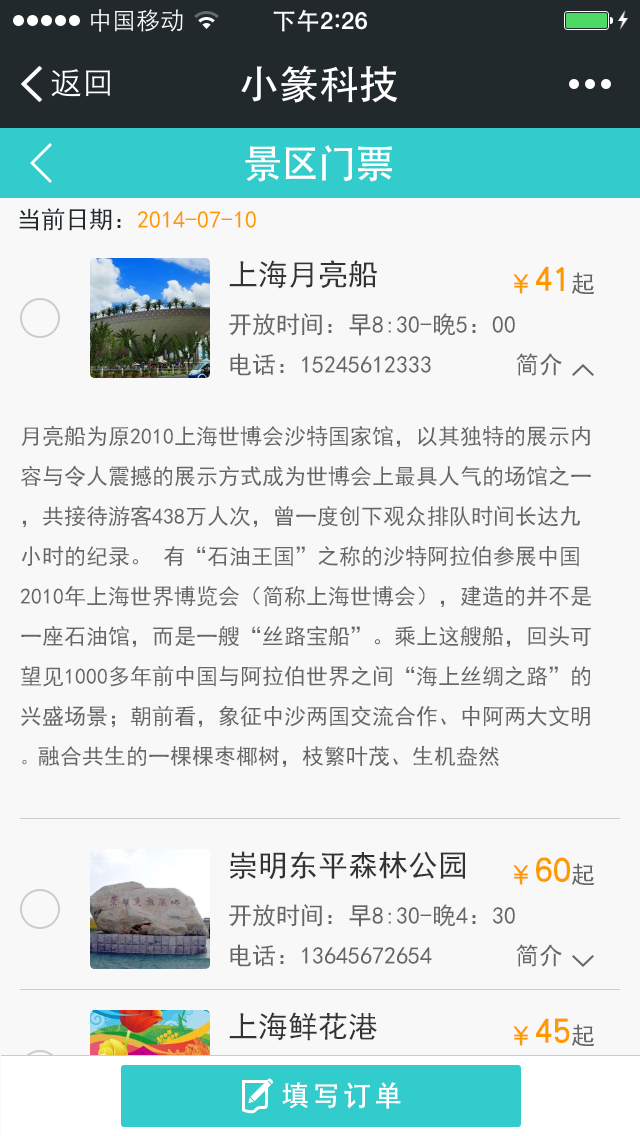
<style>
.page{position:relative;width:640px;height:1136px;background:#f8f8f8}
.page>*{position:absolute;margin:0}
.t1{font:40px "AdobeHeitiStd-Regular";color:#ffffff}
.t2{font:24px "SimHei";color:#ff9900}
.t3{font:24px "SimHei";color:#22292c}
.t4{font:24px/48px "SimHei";color:#666666}
.t5{font:30px/48px "SimHei";color:#333333}
.t6{font:24px/40px "SimHei";color:#666666}
.t7{font:36px "ç»å¸é»ä½ç®-regular";color:#ff9900}
.t8{font:28px "ç»å¸é»ä½ç®-regular";color:#ff9900}
.t9{font:24px "SimHei";color:#666666}
.t10{font:22px/40px "SimHei";color:#666666}
.t11{font:18px/40px "SimHei";color:#666666}
.t12{font:24px/48px "SimHei"}
.t13{font:30px/48px "SimHei"}
.t14{font:24px/40px "SimHei"}
.t15{font:28px "AdobeHeitiStd-Regular";letter-spacing:0.1em;color:#ffffff}
</style>
<div class="page">
<p class="t1" style="left:245px;top:145px;width:147px;height:37px">景区门票</p>
<p class="t2" style="left:19px;top:208px;width:237px;height:23px"><span class="t3">当前日期：</span>2014-07-10</p>
<p class="t4" style="left:229px;top:260px;width:286px;height:116px;text-align:right"><span class="t5">上海月亮船<br></span>开放时间：早8:30-晚5：00<br><span class="t6">电话：15245612333</span></p>
<p class="t7" style="left:513px;top:266px;width:82px;height:28px"><span class="t8">￥</span>41<span class="t9">起</span></p>
<p class="t9" style="left:516px;top:353px;width:46px;height:23px">简介</p>
<p class="t10" style="left:20px;top:425px;width:572px;height:343px;text-align:right">月亮船为原2010上海世博会沙特国家馆，以其独特的展示内容与令人震撼的展示方式成为世博会上最具人气的场馆之一，共接待游客438万人次，曾一度创下观众排队时间长达九小时的纪录。 有“石油王国”之称的沙特阿拉伯参展中国2010年上海世界博览会（简称上海世博会），建造的并不是一座石油馆，而是一艘“丝路宝船”。乘上这艘船，回头可望见1000多年前中国与阿拉伯世界之间“海上丝绸之路”的兴盛场景；朝前看，象征中沙两国交流合作、中阿两大文明融合共生的一棵棵枣椰树，枝繁叶茂、生机盎然<span class="t11">。</span></p>
<p class="t4" style="left:229px;top:851px;width:286px;height:116px;text-align:right"><span class="t5">崇明东平森林公园<br></span>开放时间：早8:30-晚4：30<br><span class="t6">电话：13645672654</span></p>
<p class="t7" style="left:513px;top:857px;width:82px;height:28px"><span class="t8">￥</span>60<span class="t9">起</span></p>
<p class="t9" style="left:516px;top:944px;width:46px;height:23px">简介</p>
<p class="t12" style="left:229px;top:1012px;width:286px;height:116px;text-align:right"><span class="t13">上海鲜花港<br></span>开放时间：早8:30-晚5：00<br><span class="t14">电话：15964751234</span></p>
<p class="t7" style="left:513px;top:1018px;width:82px;height:28px"><span class="t8">￥</span>45<span class="t9">起</span></p>
<p class="t15" style="left:282px;top:1082px;width:119px;height:27px">填写订单</p>
</div>
